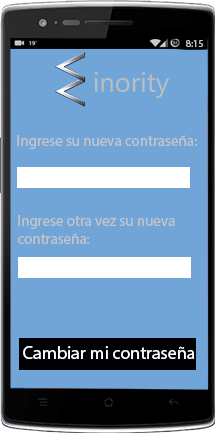
<style>
.page{position:relative;width:215px;height:433px;background:#71a4d7}
.page>*{position:absolute;margin:0}
.t1{font:10px "MyriadPro-Regular";color:#c4c5cb}
.t2{font:15px "MyriadPro-Regular";color:#c4c5cb}
.t3{font:18px "MyriadPro-Regular";color:#ffffff}
</style>
<div class="page">
<p class="t1" style="left:186px;top:40px;width:17px;height:7px">8:15</p>
<p class="t2" style="left:17px;top:135px;width:180px;height:14px">Ingrese su nueva contraseña:</p>
<p class="t2" style="left:18px;top:215px;width:157px;height:29px">Ingrese otra vez su nueva <br>contraseña:</p>
<p class="t3" style="left:23px;top:346px;width:172px;height:13px">Cambiar mi contraseña</p>
</div>
